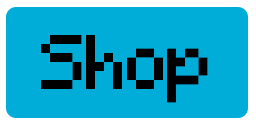
<style>
.page{position:relative;width:256px;height:128px;background:#00acd8}
.page>*{position:absolute;margin:0}
.t1{font:72px "Minecraft";color:#000000}
</style>
<div class="page">
<p class="t1" style="left:41px;top:35px;width:167px;height:68px">Shop</p>
</div>
